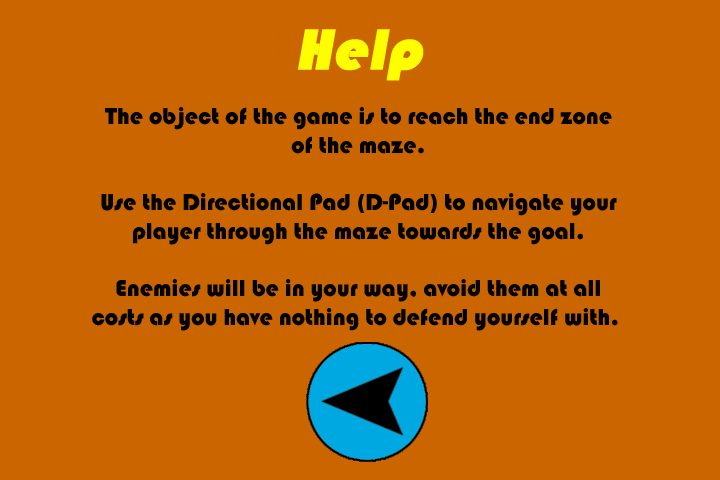
<style>
.page{position:relative;width:720px;height:480px;background:#ca6500}
.page>*{position:absolute;margin:0}
.t1{font:59.8px "Bauhaus93";color:#ffff00;font-weight:bold;font-style:italic}
.t2{font:23.9px "Bauhaus93";color:#000000}
</style>
<div class="page">
<p class="t1" style="left:298px;top:29px;width:126px;height:52px">Help</p>
<p class="t2" style="left:92px;top:107px;width:526px;height:224px;text-align:center">The object of the game is to reach the end zone<br>of the maze.<br><br>Use the Directional Pad (D-Pad) to navigate your<br>player through the maze towards the goal.<br><br>Enemies will be in your way, avoid them at all<br>costs as you have nothing to defend yourself with.</p>
</div>
